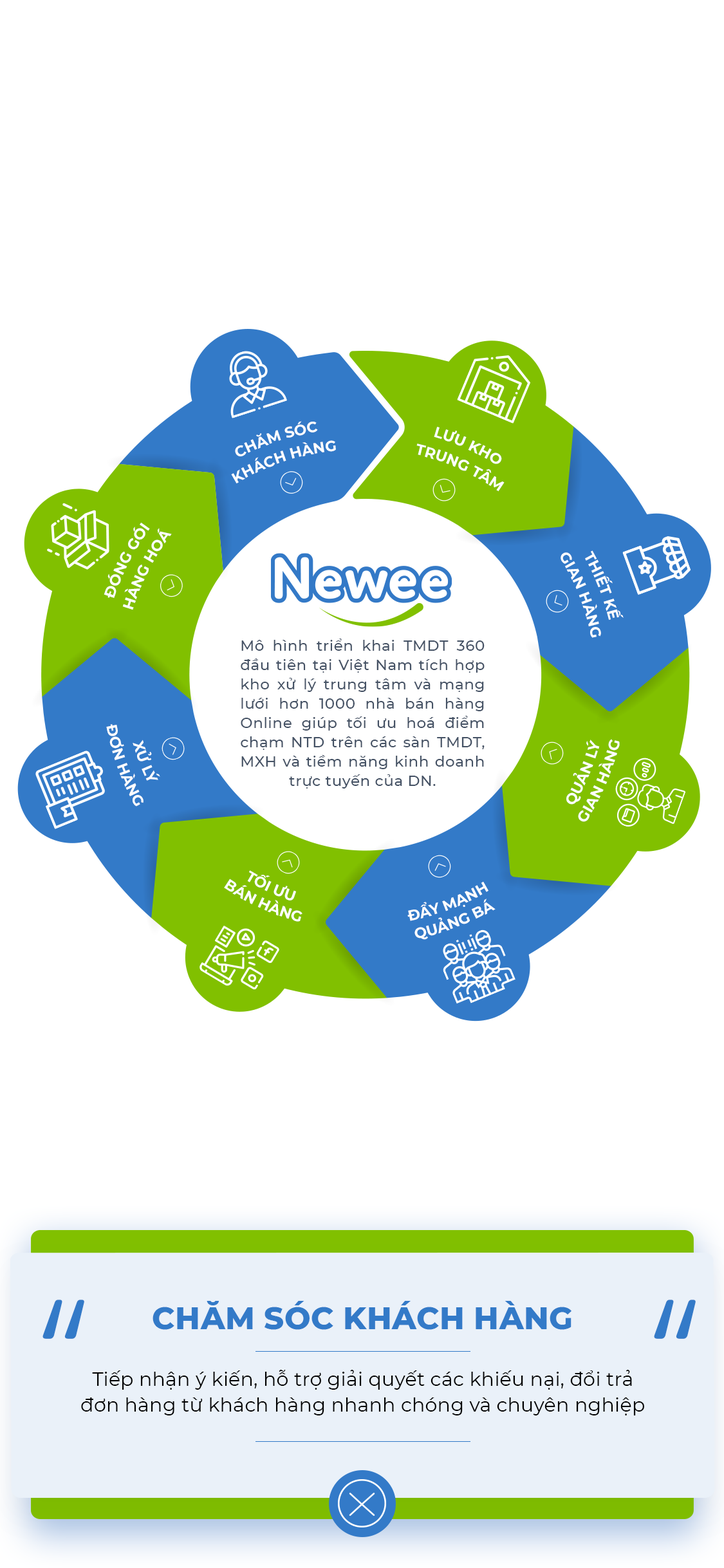
<style>
.page{position:relative;width:724px;height:1568px;background:#ffffff}
.page>*{position:absolute;margin:0}
.t1{font:14.8px "Montserrat-Bold";color:#ffffff;text-transform:uppercase}
.t2{font:14.8px/19.3px "Montserrat-Medium";letter-spacing:0.025em;color:#455265}
.t3{font:210.2px "#9Slide03IcielPantonLight";letter-spacing:0.01em;color:#337ac8;text-transform:uppercase;font-weight:bold}
.t4{font:30.9px "Montserrat-ExtraBold";letter-spacing:0.01em;color:#337ac8;text-transform:uppercase}
.t5{font:19.3px/25.7px "Montserrat-Regular";letter-spacing:0.01em;color:#000000}
</style>
<div class="page">
<p class="t1" style="left:235px;top:421px;width:83px;height:35px;text-align:center;rotate:46deg">Chăm sóc<br>khách hàng</p>
<p class="t1" style="left:434px;top:427px;width:68px;height:37px;text-align:center">lưu kho</p>
<p class="t1" style="left:231px;top:440px;width:105px;height:43px;text-align:center;rotate:46deg">khách hàng<br>khách hàng</p>
<p class="t1" style="left:416px;top:443px;width:89px;height:49px;text-align:center">trung tâm</p>
<p class="t1" style="left:104px;top:523px;width:46px;height:75px;rotate:-43deg">đóng gói</p>
<p class="t1" style="left:122px;top:528px;width:50px;height:82px;rotate:-43deg">hàng hoá</p>
<p class="t1" style="left:561px;top:552px;width:40px;height:86px;text-align:center">gian hàng</p>
<p class="t1" style="left:585px;top:550px;width:39px;height:70px;text-align:center">thiết kế</p>
<p class="t2" style="left:241px;top:639px;width:244px;height:150px;text-align:justify">Mô hình triển khai TMDT 360 đầu tiên tại Việt Nam tích hợp kho xử lý trung tâm và mạng lưới hơn 1000 nhà bán hàng Online giúp tối ưu hoá điểm chạm NTD trên các sàn TMDT, MXH và tiềm năng kinh doanh trực tuyến của DN.</p>
<p class="t1" style="left:106px;top:724px;width:38px;height:83px;text-align:center">đơn hàng</p>
<p class="t1" style="left:133px;top:740px;width:27px;height:41px;text-align:center">xử lý</p>
<p class="t1" style="left:566px;top:740px;width:34px;height:65px;text-align:center">quản lý</p>
<p class="t1" style="left:578px;top:739px;width:42px;height:83px;rotate:1deg">gian hàng</p>
<p class="t1" style="left:224px;top:879px;width:79px;height:43px;rotate:1deg">bán hàng</p>
<p class="t1" style="left:247px;top:870px;width:49px;height:31px;rotate:1deg">tối ưu</p>
<p class="t1" style="left:407px;top:881px;width:82px;height:40px;text-align:center">đẩy mạnh</p>
<p class="t1" style="left:415px;top:899px;width:81px;height:41px;rotate:1deg">quảng bá</p>
<p class="t3" style="left:42px;top:1300px;width:42px;height:39px">“</p>
<p class="t4" style="left:153px;top:1301px;width:419px;height:29px">Chăm sóc khách hàng</p>
<p class="t3" style="left:654px;top:1300px;width:42px;height:39px">“</p>
<p class="t5" style="left:81px;top:1370px;width:563px;height:45px;text-align:center">Tiếp nhận ý kiến, hỗ trợ giải quyết các khiếu nại, đổi trả đơn hàng từ khách hàng nhanh chóng và chuyên nghiệp</p>
</div>
